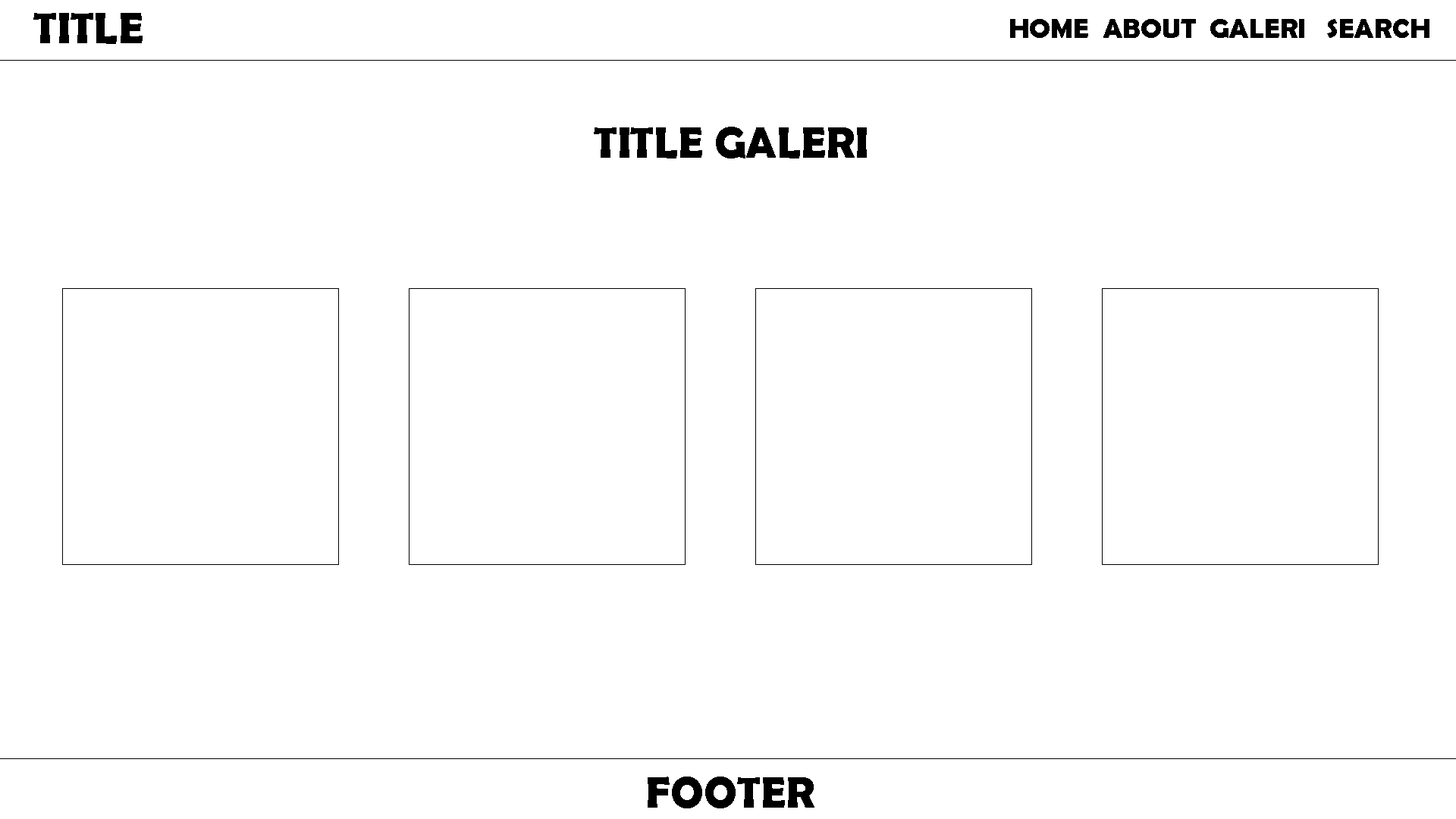
<style>
.page{position:relative;width:1456px;height:819px;background:#ffffff}
.page>*{position:absolute;margin:0}
.t1{font:44.4px "BerlinSansFBDemi-Bold";color:#000000}
.t2{font:28px "BerlinSansFBDemi-Bold";color:#000000}
</style>
<div class="page">
<p class="t1" style="left:33px;top:13px;width:110px;height:31px">TITLE</p>
<p class="t2" style="left:1010px;top:19px;width:419px;height:19px">HOME  ABOUT  GALERI   SEARCH</p>
<p class="t1" style="left:594px;top:127px;width:273px;height:31px">TITLE GALERI</p>
<p class="t1" style="left:648px;top:777px;width:166px;height:31px">FOOTER</p>
</div>
